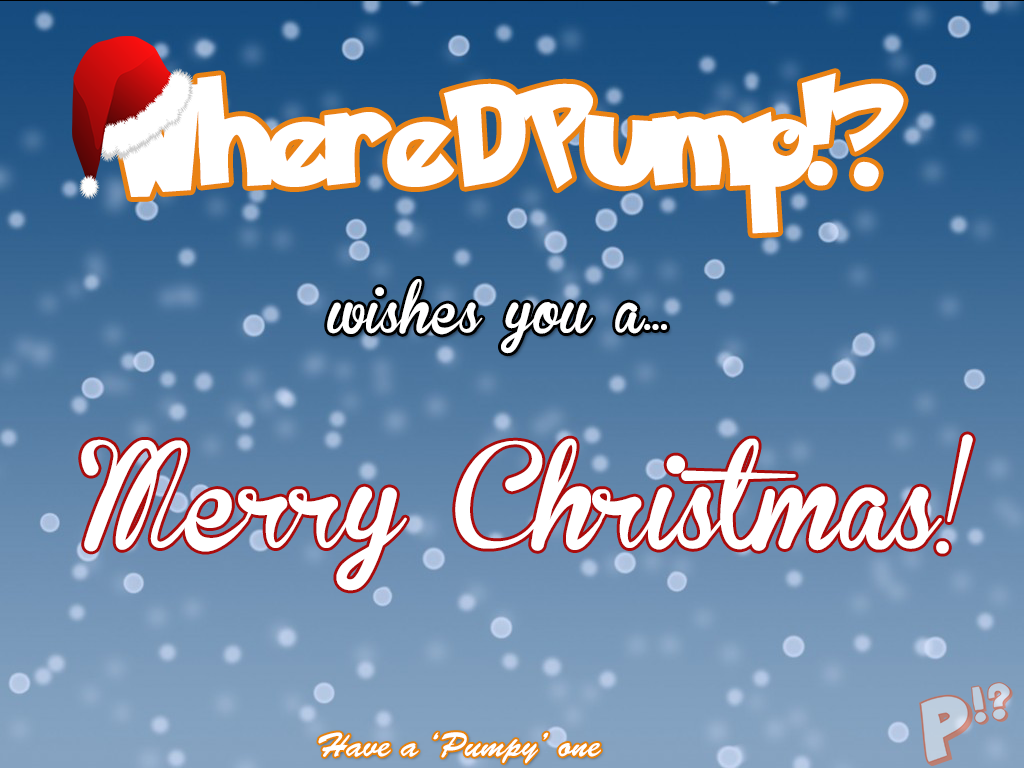
<style>
.page{position:relative;width:1024px;height:768px}
.page>*{position:absolute;margin:0}
.t1{font:115px "PokemonSolidNormal";color:#ffffff}
.t2{font:50px "BrannbollFet";color:#ffffff}
.t3{font:102px "BrannbollFet";color:#ffffff}
.t4{font:34px "BrushScriptStd";color:#ffffff}
</style>
<div class="page">
<p class="t1" style="left:110px;top:73px;width:794px;height:161px">WhereDPump!?</p>
<p class="t2" style="left:327px;top:279px;width:340px;height:75px">wishes you a...</p>
<p class="t3" style="left:81px;top:434px;width:892px;height:157px">Merry Christmas!</p>
<p class="t4" style="left:318px;top:732px;width:283px;height:32px">Have a ‘Pumpy’ one</p>
</div>
